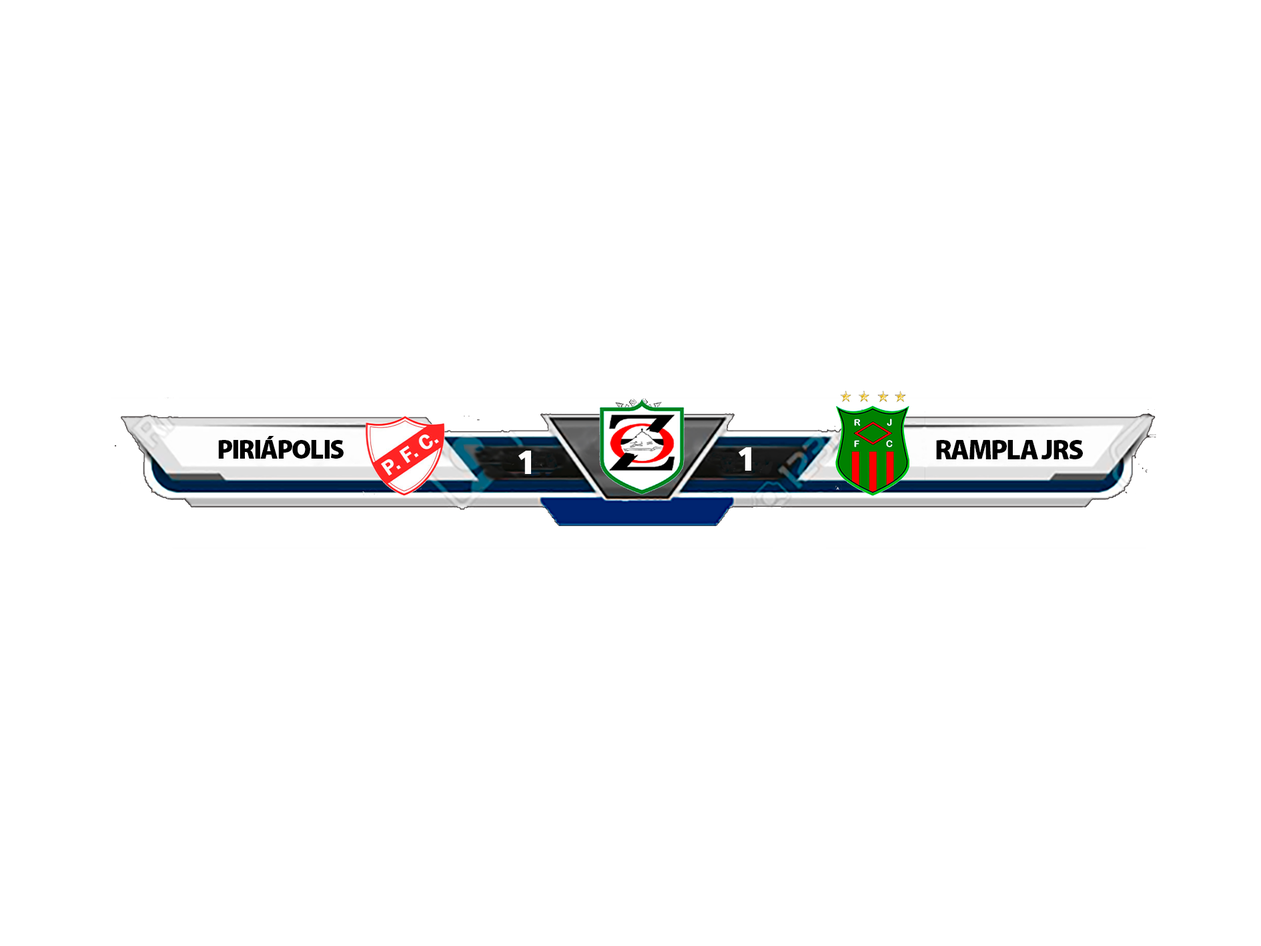
<style>
.page{position:relative;width:1261px;height:946px;background:#ffffff}
.page>*{position:absolute;margin:0}
.t1{font:26.8px "MyriadPro-Black";letter-spacing:-0.05em;color:#000000}
.t2{font:33.6px "AktivGrotesk-XBold";letter-spacing:-0.05em;color:#fefcfc}
.t3{font:28px "MyriadPro-Black";letter-spacing:-0.05em;color:#000000}
</style>
<div class="page">
<p class="t1" style="left:218px;top:436px;width:126px;height:22px">PIRIÁPOLIS</p>
<p class="t2" style="left:739px;top:447px;width:12px;height:23px">1</p>
<p class="t3" style="left:936px;top:440px;width:147px;height:19px">RAMPLA JRS</p>
<p class="t2" style="left:518px;top:450px;width:13px;height:24px">1</p>
</div>
